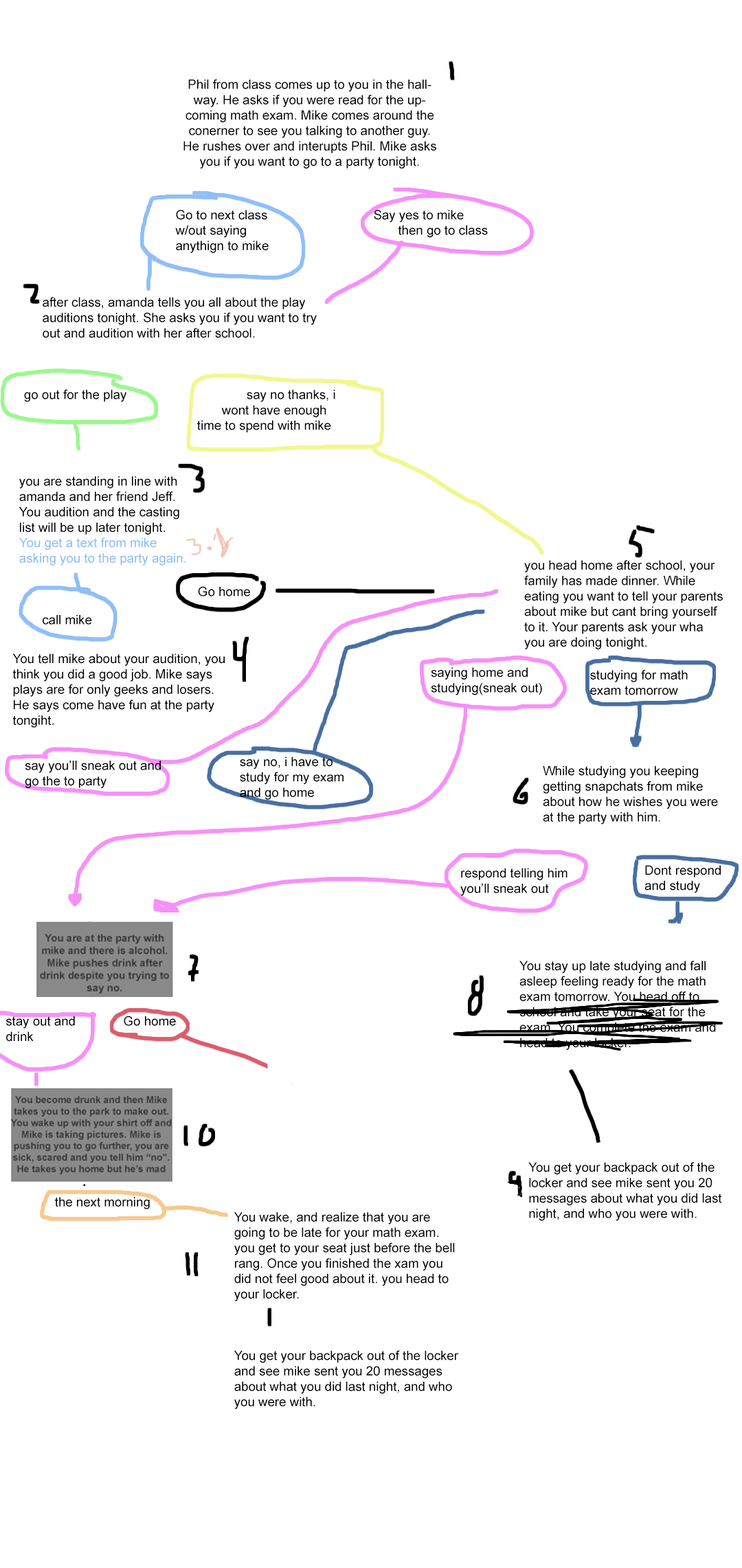
<style>
.page{position:relative;width:742px;height:1568px;background:#ffffff}
.page>*{position:absolute;margin:0}
.t1{font:12.8px "ArialMT";color:#000000}
.t2{font:12.8px "ArialMT";color:#90bef7}
</style>
<div class="page">
<p class="t1" style="left:183px;top:79px;width:253px;height:90px;text-align:center">Phil from class comes up to you in the hallway. He asks if you were read for the upcoming math exam. Mike comes around the conerner to see you talking to another guy. He rushes over and interupts Phil. Mike asks you if you want to go to a party tonight.</p>
<p class="t1" style="left:175px;top:210px;width:313px;height:43px">Go to next class     Say yes to mike <br>w/out saying       then go to class<br>anythign to mike</p>
<p class="t1" style="left:43px;top:297px;width:274px;height:41px">after class, amanda tells you all about the play auditions tonight. She asks you if you want to try out and audition with her after school.</p>
<p class="t1" style="left:24px;top:390px;width:311px;height:43px">go out for the play      say no thanks, i            wont have enough          time to spend with mike</p>
<p class="t1" style="left:19px;top:476px;width:167px;height:89px">you are standing in line with amanda and her friend Jeff.  You audition and the casting list will be up later tonight.<br><span class="t2">You get a text from mike asking you to the party again.</span></p>
<p class="t1" style="left:524px;top:560px;width:199px;height:89px">you head home after school, your family has made dinner. While eating you want to tell your parents about mike but cant bring yourself to it. Your parents ask your wha you are doing tonight.</p>
<p class="t1" style="left:198px;top:586px;width:52px;height:10px">Go home</p>
<p class="t1" style="left:43px;top:615px;width:49px;height:10px">call mike</p>
<p class="t1" style="left:12px;top:653px;width:213px;height:75px">You tell mike about your audition, you think you did a good job. Mike says plays are for only geeks and losers. He says come have fun at the party tongiht.</p>
<p class="t1" style="left:431px;top:667px;width:111px;height:28px">saying home and studying(sneak out)</p>
<p class="t1" style="left:590px;top:670px;width:98px;height:25px">studying for math exam tomorrow</p>
<p class="t1" style="left:25px;top:761px;width:136px;height:27px">say you’ll sneak out and go the to party</p>
<p class="t1" style="left:240px;top:757px;width:104px;height:43px">say no, i have to study for my exam and go home</p>
<p class="t1" style="left:543px;top:765px;width:175px;height:60px">While studying you keeping getting snapchats from mike about how he wishes you were at the party with him.</p>
<p class="t1" style="left:460px;top:868px;width:108px;height:28px">respond telling him you’ll sneak out</p>
<p class="t1" style="left:645px;top:865px;width:76px;height:28px">Dont respond and study</p>
<p class="t1" style="left:519px;top:961px;width:197px;height:89px">You stay up late studying and fall asleep feeling ready for the math exam tomorrow. You head off to school and take your seat for the exam. You complete the exam and head to your locker.</p>
<p class="t1" style="left:6px;top:1016px;width:69px;height:26px">stay out and <br>drink</p>
<p class="t1" style="left:124px;top:1016px;width:52px;height:10px">Go home</p>
<p class="t1" style="left:528px;top:1162px;width:194px;height:59px">You get your backpack out of the locker and see mike sent you 20 messages about what you did last night, and who you were with.</p>
<p class="t1" style="left:55px;top:1197px;width:95px;height:12px">the next morning</p>
<p class="t1" style="left:234px;top:1212px;width:221px;height:89px">You wake, and realize that you are going to be late for your math exam. you get to your seat just before the bell rang. Once you finished the xam you did not feel good about it. you head to your locker.</p>
<p class="t1" style="left:234px;top:1350px;width:225px;height:59px">You get your backpack out of the locker and see mike sent you 20 messages about what you did last night, and who you were with.</p>
</div>
